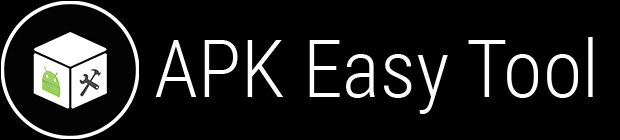
<style>
.page{position:relative;width:620px;height:140px;background:#000000}
.page>*{position:absolute;margin:0}
.t1{font:80px "RobotoCondensed-Light";color:#ffffff}
</style>
<div class="page">
<p class="t1" style="left:155px;top:37px;width:438px;height:77px">APK Easy Tool</p>
</div>
